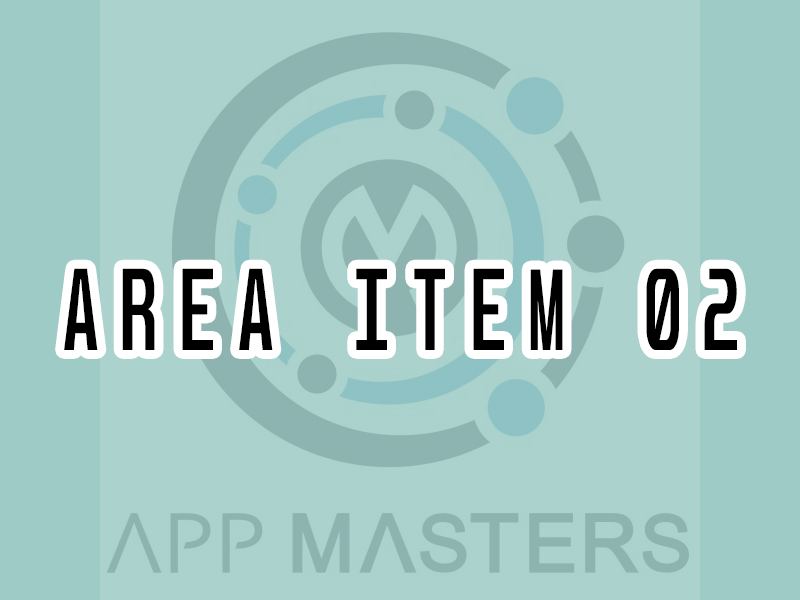
<style>
.page{position:relative;width:800px;height:600px;background:#abd2cd}
.page>*{position:absolute;margin:0}
.t1{font:100.3px "Unispace-Bold";letter-spacing:0.34em;color:#000000;text-transform:uppercase;scale:0.61 1}
</style>
<div class="page">
<p class="t1" style="left:64px;top:268px;width:673px;height:82px">Area Item 02</p>
</div>
